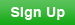
<style>
.page{position:relative;width:75px;height:25px}
.page>*{position:absolute;margin:0}
.t1{font:14px "Helvetica-Bold";letter-spacing:0.02em;color:#ffffff}
</style>
<div class="page">
<p class="t1" style="left:11px;top:7px;width:54px;height:13px">Sign Up</p>
</div>
